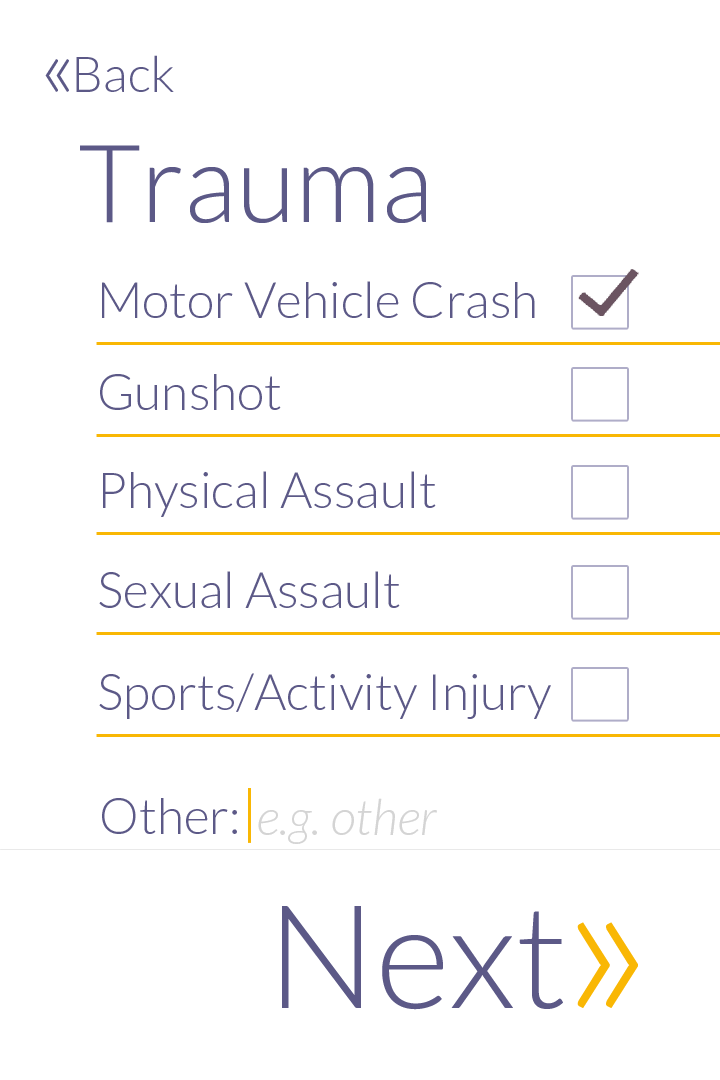
<style>
.page{position:relative;width:720px;height:1080px;background:#ffffff}
.page>*{position:absolute;margin:0}
.t1{font:86px "Lato-Light";color:#5c5987}
.t2{font:50px "Lato-Light";color:#5c5987}
.t3{font:108px "Lato-Light";color:#5c5987}
.t4{font:50px "Lato-LightItalic";color:#d4d4d4}
.t5{font:144px "Lato-Light";color:#5c5987}
.t6{font:222px "Lato-Light";color:#f9b704}
</style>
<div class="page">
<p class="t1" style="left:45px;top:59px;width:24px;height:33px">«</p>
<p class="t2" style="left:76px;top:55px;width:98px;height:37px">Back</p>
<p class="t3" style="left:80px;top:145px;width:346px;height:78px">Trauma</p>
<p class="t2" style="left:102px;top:281px;width:433px;height:37px">Motor Vehicle Crash</p>
<p class="t2" style="left:100px;top:374px;width:181px;height:36px">Gunshot</p>
<p class="t2" style="left:103px;top:471px;width:333px;height:46px">Physical Assault</p>
<p class="t2" style="left:99px;top:571px;width:301px;height:37px">Sexual Assault</p>
<p class="t2" style="left:99px;top:673px;width:452px;height:46px">Sports/Activity Injury</p>
<p class="t2" style="left:102px;top:798px;width:135px;height:36px">Other:</p>
<p class="t4" style="left:258px;top:798px;width:179px;height:46px">e.g. other</p>
<p class="t5" style="left:282px;top:906px;width:281px;height:104px">Next</p>
<p class="t6" style="left:577px;top:922px;width:61px;height:86px">»</p>
</div>
